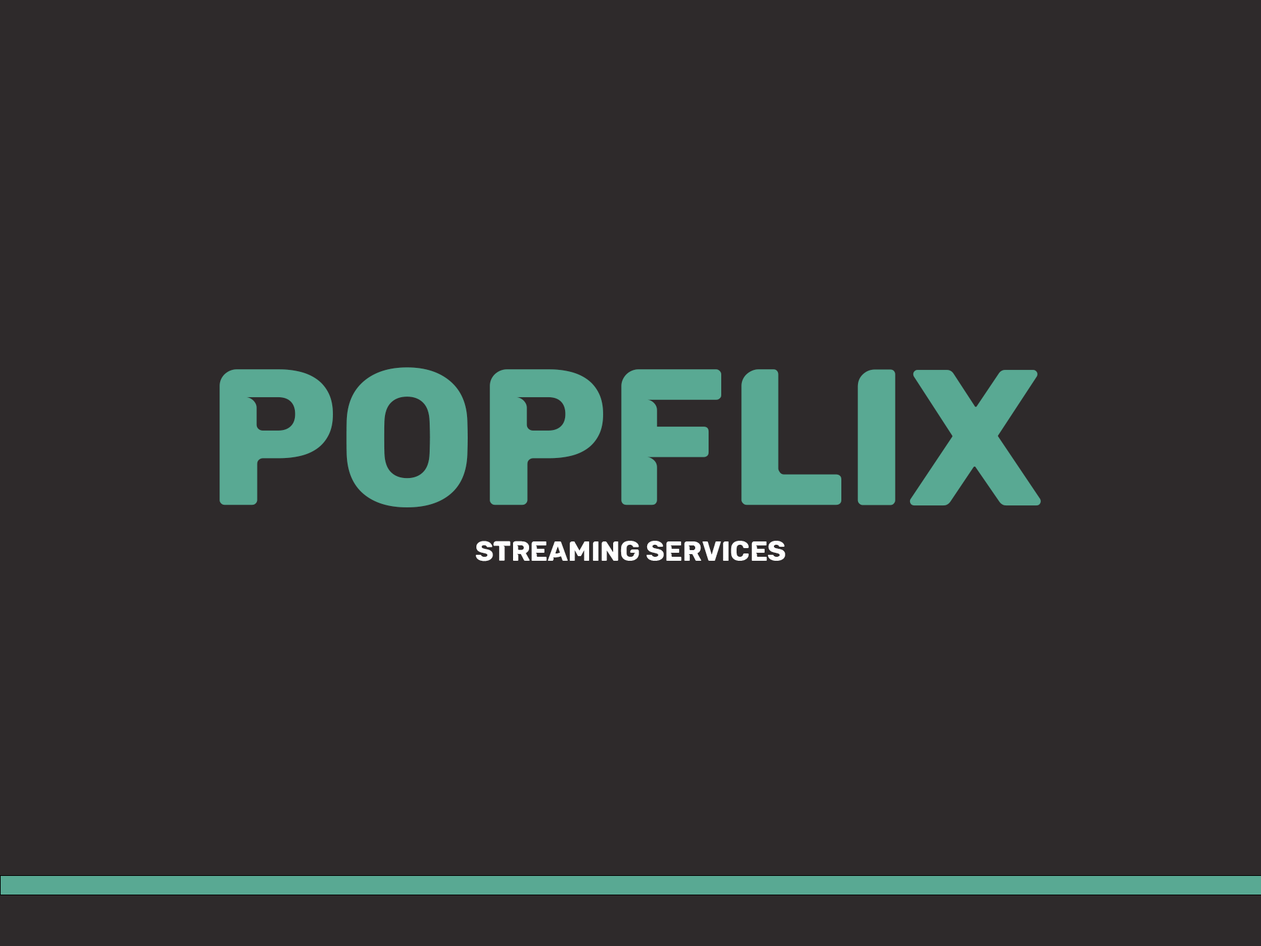
<style>
.page{position:relative;width:1261px;height:946px;background:#2e2a2b}
.page>*{position:absolute;margin:0}
.t1{font:194px "Cunia";color:#59a993}
.t2{font:27.8px "Cunia";color:#ffffff}
</style>
<div class="page">
<p class="t1" style="left:220px;top:367px;width:821px;height:140px">POPFLIX</p>
<p class="t2" style="left:476px;top:540px;width:309px;height:21px">STReaming services</p>
</div>
